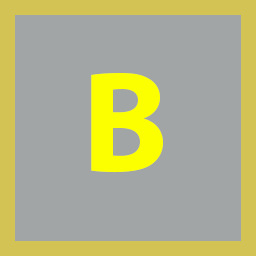
<style>
.page{position:relative;width:256px;height:256px;background:#a2a5a5}
.page>*{position:absolute;margin:0}
.t1{font:144px "MyriadPro-Bold";color:#fcff00}
</style>
<div class="page">
<p class="t1" style="left:91px;top:73px;width:72px;height:100px">B</p>
</div>
